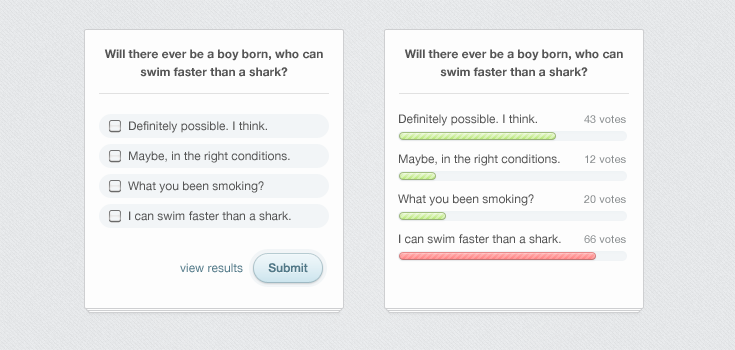
<style>
.page{position:relative;width:735px;height:350px;background:#fdfdfd}
.page>*{position:absolute;margin:0}
.t1{font:12px/18px "HelveticaNeue-Bold";color:#555555}
.t2{font:12px "HelveticaNeue";color:#555555}
.t3{font:11px "HelveticaNeue";color:#8a8e90}
.t4{font:12px "HelveticaNeue";color:#527988}
.t5{font:12px "HelveticaNeue-Medium";color:#527988}
</style>
<div class="page">
<p class="t1" style="left:104px;top:49px;width:219px;height:28px;text-align:center">Will there ever be a boy born, who can swim faster than a shark?</p>
<p class="t1" style="left:404px;top:49px;width:219px;height:28px;text-align:center">Will there ever be a boy born, who can swim faster than a shark?</p>
<p class="t2" style="left:129px;top:121px;width:138px;height:12px">Definitely possible. I think.</p>
<p class="t2" style="left:399px;top:114px;width:138px;height:12px">Definitely possible. I think.</p>
<p class="t3" style="left:584px;top:115px;width:42px;height:8px">43 votes</p>
<p class="t2" style="left:129px;top:151px;width:161px;height:12px">Maybe, in the right conditions.</p>
<p class="t2" style="left:399px;top:154px;width:161px;height:12px">Maybe, in the right conditions.</p>
<p class="t3" style="left:585px;top:155px;width:41px;height:8px">12 votes</p>
<p class="t2" style="left:128px;top:181px;width:136px;height:12px">What you been smoking?</p>
<p class="t2" style="left:398px;top:194px;width:136px;height:12px">What you been smoking?</p>
<p class="t3" style="left:584px;top:195px;width:42px;height:8px">20 votes</p>
<p class="t2" style="left:129px;top:211px;width:162px;height:10px">I can swim faster than a shark.</p>
<p class="t2" style="left:399px;top:234px;width:162px;height:10px">I can swim faster than a shark.</p>
<p class="t3" style="left:584px;top:235px;width:42px;height:8px">66 votes</p>
<p class="t4" style="left:180px;top:263px;width:63px;height:10px">view results</p>
<p class="t5" style="left:268px;top:263px;width:40px;height:10px">Submit</p>
</div>
